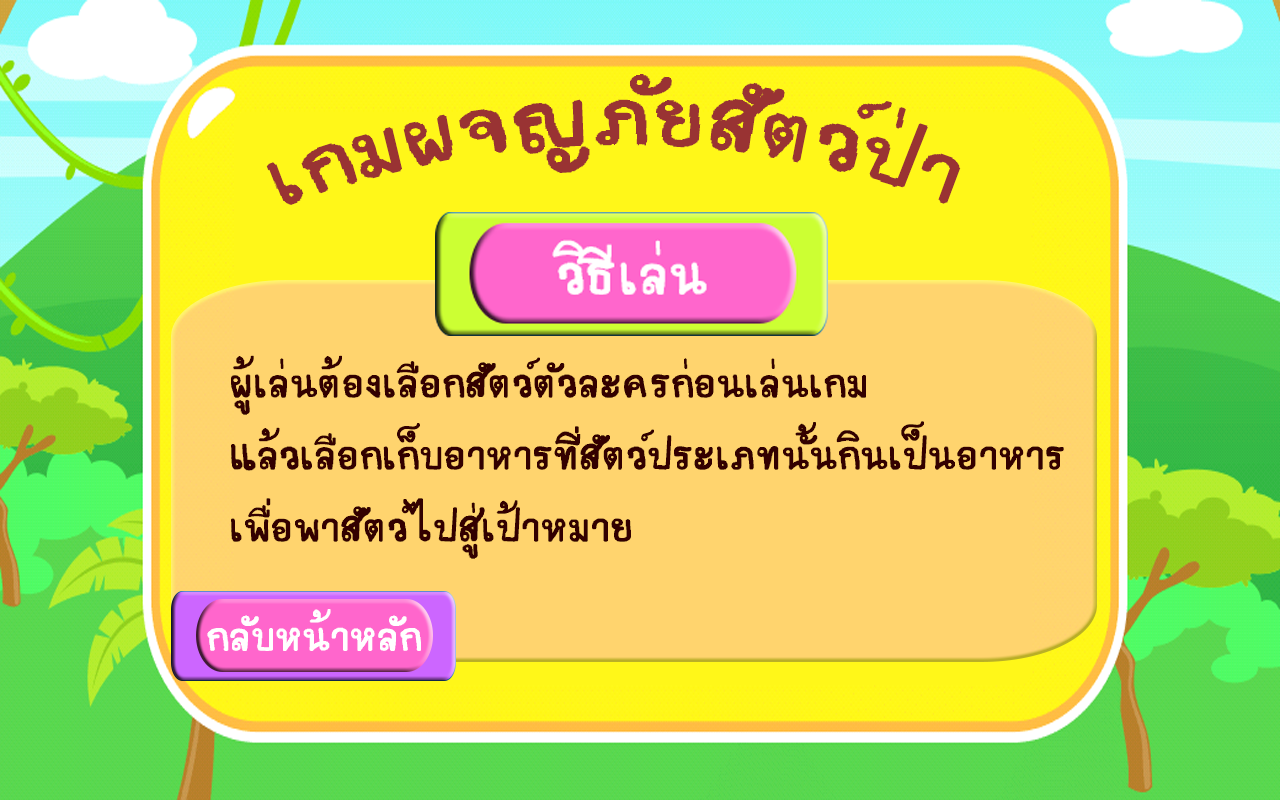
<style>
.page{position:relative;width:1280px;height:800px;background:#ffd46e}
.page>*{position:absolute;margin:0}
.t1{font:120px "teddy";color:#993333}
.t2{font:60px "teddy";color:#330000}
</style>
<div class="page">
<p class="t1" style="left:266px;top:74px;width:695px;height:131px">เกมผจญภัยสัตว์ป่า</p>
<p class="t2" style="left:231px;top:355px;width:833px;height:204px">ผู้เล่นต้องเลือกสัตว์ตัวละครก่อนเล่นเกม<br>แล้วเลือกเก็บอาหารที่สัตว์ประเภทนั้นกินเป็นอาหาร<br>เพื่อพาสัตว์ไปสู่เป่้าหมาย</p>
</div>
